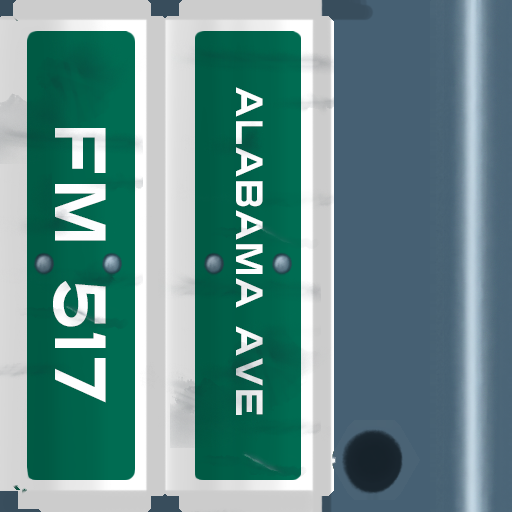
<style>
.page{position:relative;width:512px;height:512px}
.page>*{position:absolute;margin:0}
.t1{font:38px "Turnpike";color:#fefeff;scale:0.75 1}
.t2{font:72px "Turnpike";color:#fefeff;scale:0.75 1}
</style>
<div class="page">
<p class="t1" style="left:236px;top:87px;width:27px;height:328px;rotate:90deg">Alabama Ave</p>
<p class="t2" style="left:53px;top:128px;width:53px;height:275px;rotate:90deg">fm 517</p>
</div>
